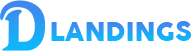
<style>
.page{position:relative;width:192px;height:51px;background:#ffffff}
.page>*{position:absolute;margin:0}
.t1{font:25.8px "Cocogoose";color:#23a3f4}
</style>
<div class="page">
<p class="t1" style="left:51px;top:21px;width:140px;height:20px">LANDINGS</p>
</div>
